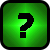
<style>
.page{position:relative;width:50px;height:50px;background:#000000}
.page>*{position:absolute;margin:0}
.t1{font:30px "Revue";color:#000000}
</style>
<div class="page">
<p class="t1" style="left:18px;top:13px;width:16px;height:25px">?</p>
</div>
